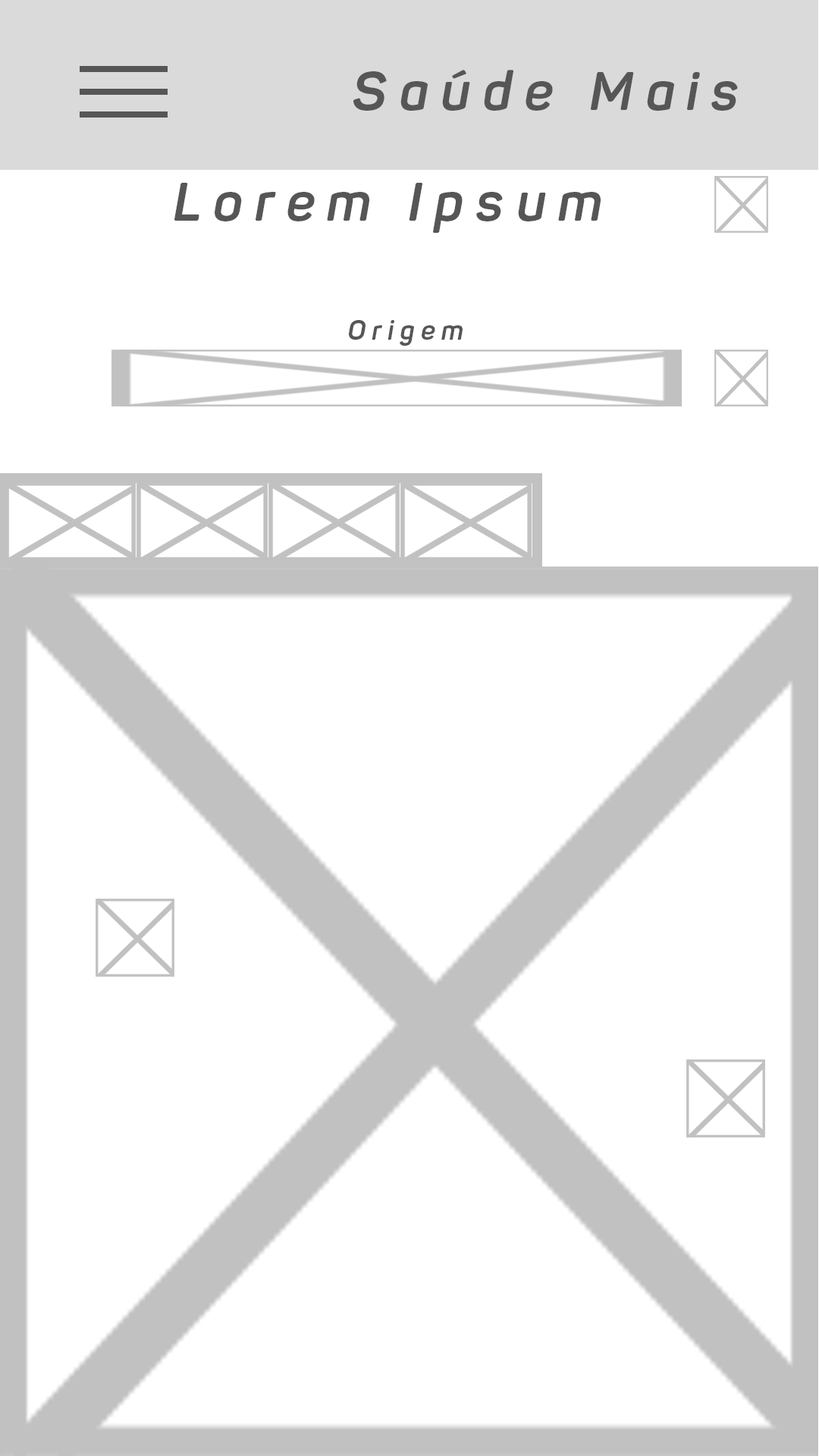
<style>
.page{position:relative;width:819px;height:1456px;background:#ffffff}
.page>*{position:absolute;margin:0}
.t1{font:53.9px "Panton-BoldItalic";letter-spacing:0.23em;color:#565656}
.t2{font:27px "Panton-BoldItalic";letter-spacing:0.23em;color:#565656}
</style>
<div class="page">
<p class="t1" style="left:353px;top:70px;width:385px;height:41px">Saúde Mais</p>
<p class="t1" style="left:174px;top:183px;width:427px;height:50px">Lorem Ipsum</p>
<p class="t2" style="left:349px;top:320px;width:114px;height:26px">Origem</p>
</div>
